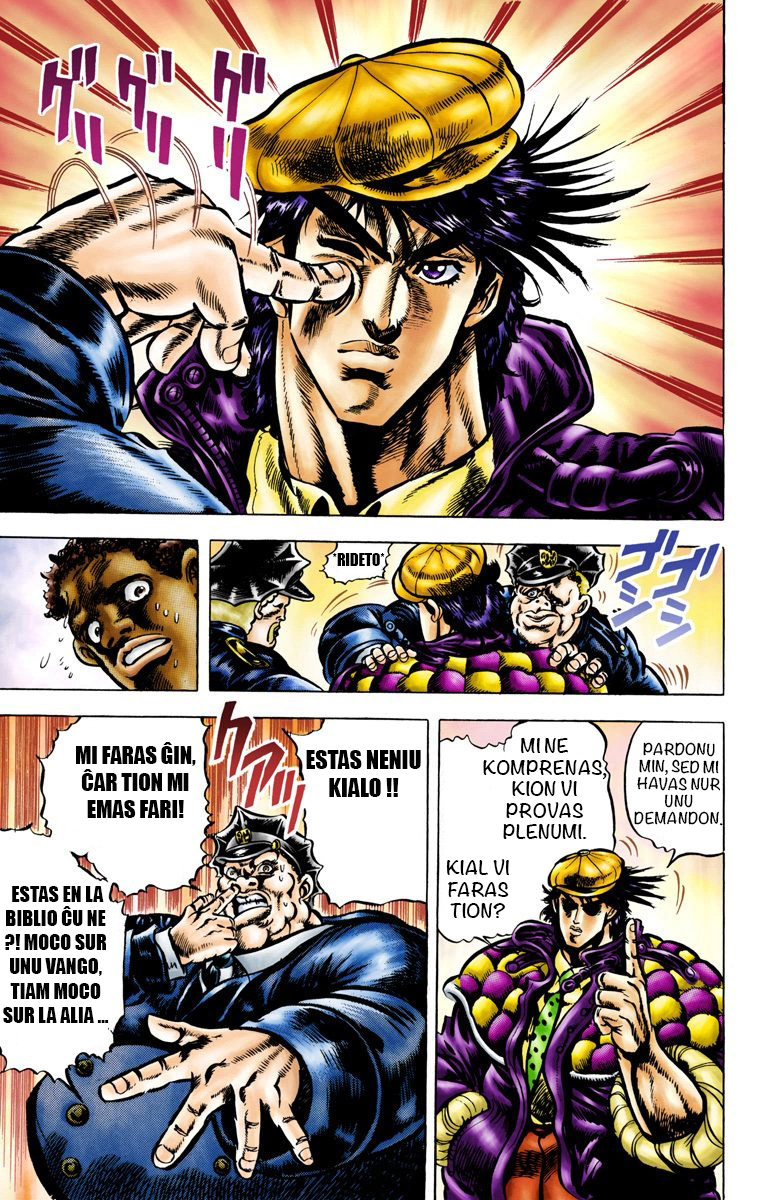
<style>
.page{position:relative;width:780px;height:1200px}
.page>*{position:absolute;margin:0}
.t1{font:15.6px "Impact";color:#000000}
.t2{font:22.5px "Impact";color:#000000}
.t3{font:23.7px "Impact";color:#000000}
.t4{font:18px "Noteworthy-Bold";color:#000000}
.t5{font:14.3px "Noteworthy-Bold";color:#000000}
.t6{font:20px "Impact";color:#000000}
</style>
<div class="page">
<p class="t1" style="left:332px;top:553px;width:53px;height:13px">*RIDETO*</p>
<p class="t2" style="left:76px;top:742px;width:120px;height:76px;text-align:center">MI FARAS ĜIN, ĈAR TION MI EMAS FARI!</p>
<p class="t3" style="left:306px;top:750px;width:115px;height:47px;text-align:center">ESTAS NENIU KIALO !!</p>
<p class="t4" style="left:483px;top:738px;width:124px;height:101px;text-align:center">MI NE KOMPRENAS, KION VI PROVAS PLENUMI.</p>
<p class="t5" style="left:634px;top:742px;width:89px;height:84px;rotate:1deg">PARDONU MIN, SED MI HAVAS NUR UNU DEMANDON.</p>
<p class="t4" style="left:446px;top:859px;width:64px;height:59px;text-align:center">KIAL VI FARAS TION?</p>
<p class="t6" style="left:3px;top:886px;width:106px;height:137px;text-align:center">ESTAS EN LA BIBLIO ĈU NE ?! MOCO SUR UNU VANGO, TIAM MOCO SUR LA ALIA ...</p>
</div>
